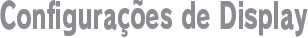
<style>
.page{position:relative;width:308px;height:38px;background:#ffffff}
.page>*{position:absolute;margin:0}
.t1{font:36px "RodinPro-EB";color:#8b8c92;scale:0.64 1}
</style>
<div class="page">
<p class="t1" style="left:0px;top:0px;width:308px;height:37px">Configurações de Display</p>
</div>
